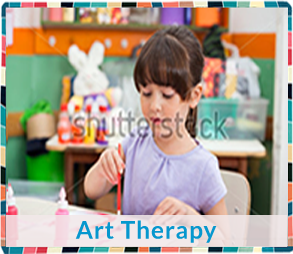
<style>
.page{position:relative;width:293px;height:254px}
.page>*{position:absolute;margin:0}
.t1{font:24.2px "Lato-Bold";letter-spacing:0.04em;color:#0697ce}
</style>
<div class="page">
<p class="t1" style="left:75px;top:220px;width:142px;height:23px">Art Therapy</p>
</div>
